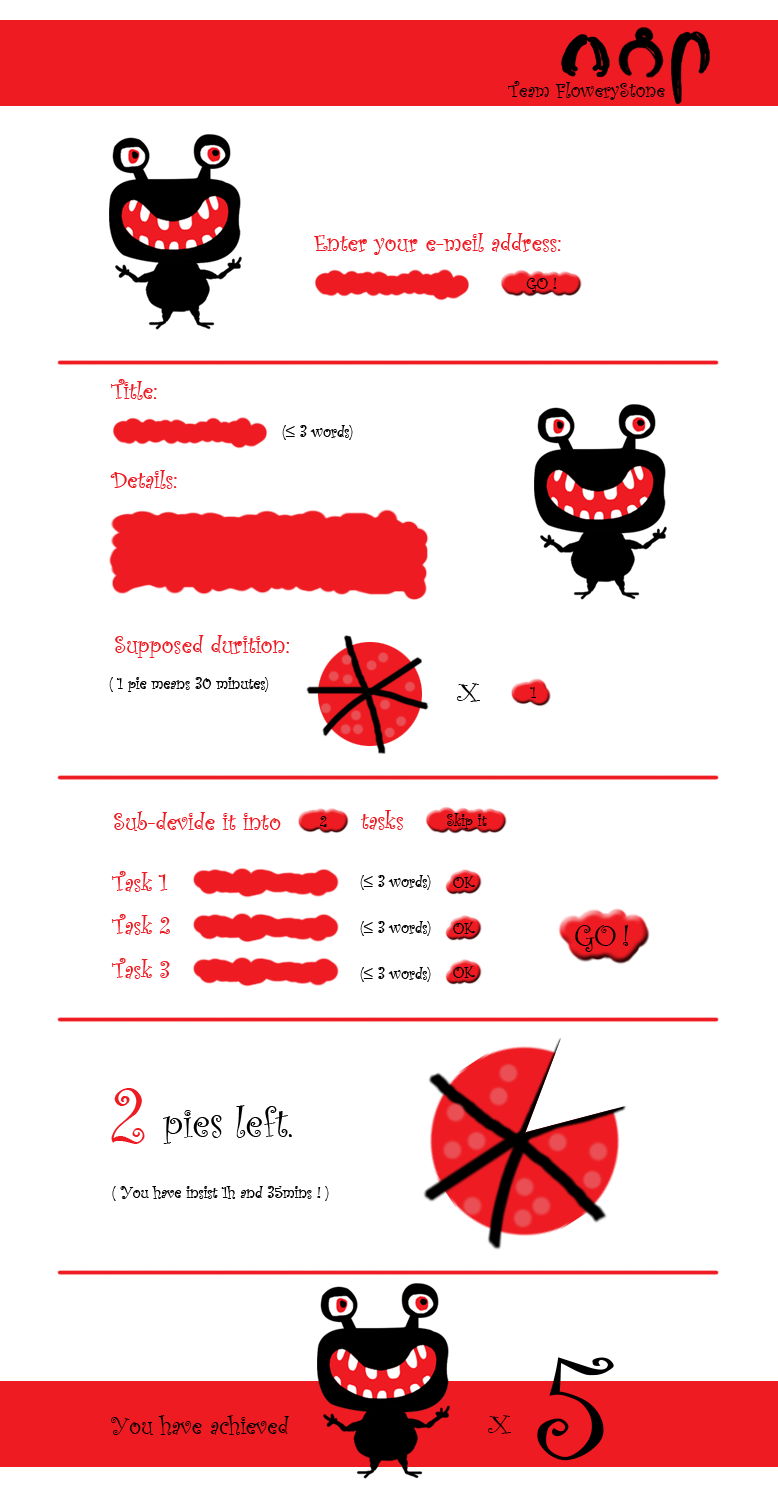
<style>
.page{position:relative;width:778px;height:1487px;background:#ffffff}
.page>*{position:absolute;margin:0}
.t1{font:20.8px "CurlzMT";color:#000000}
.t2{font:25px "CurlzMT";color:#ee1b22}
.t3{font:16.7px "CurlzMT";color:#000000}
.t4{font:25px "CurlzMT";color:#000000;scale:1.49 1}
.t5{font:33.3px "CurlzMT";color:#000000}
.t6{font:83.3px "CurlzMT";color:#ee1b22}
.t7{font:41.7px "CurlzMT";color:#000000}
.t8{font:150px "CurlzMT";color:#000000}
.t9{font:25px "CurlzMT";color:#000000}
</style>
<div class="page">
<p class="t1" style="left:507px;top:81px;width:158px;height:19px">Team FloweryStone</p>
<p class="t2" style="left:314px;top:233px;width:247px;height:22px">Enter your e-meil address:</p>
<p class="t3" style="left:526px;top:278px;width:31px;height:14px">GO !</p>
<p class="t2" style="left:110px;top:379px;width:47px;height:21px">Title:</p>
<p class="t3" style="left:282px;top:425px;width:71px;height:15px">(≤ 3 words)</p>
<p class="t2" style="left:110px;top:470px;width:67px;height:19px">Details:</p>
<p class="t2" style="left:115px;top:635px;width:174px;height:23px">Supposed durition:</p>
<p class="t3" style="left:109px;top:677px;width:160px;height:15px">( 1 pie means 30 minutes)</p>
<p class="t4" style="left:456px;top:683px;width:24px;height:19px">X</p>
<p class="t3" style="left:530px;top:687px;width:6px;height:11px">1</p>
<p class="t2" style="left:114px;top:811px;width:167px;height:20px">Sub-devide it into</p>
<p class="t3" style="left:319px;top:816px;width:8px;height:11px">2</p>
<p class="t2" style="left:361px;top:810px;width:42px;height:20px">tasks</p>
<p class="t3" style="left:447px;top:813px;width:40px;height:16px">Skip it</p>
<p class="t2" style="left:111px;top:871px;width:57px;height:21px">Task 1</p>
<p class="t3" style="left:360px;top:875px;width:71px;height:15px">(≤ 3 words)</p>
<p class="t3" style="left:453px;top:876px;width:22px;height:12px">OK</p>
<p class="t2" style="left:111px;top:914px;width:59px;height:21px">Task 2</p>
<p class="t3" style="left:360px;top:921px;width:71px;height:15px">(≤ 3 words)</p>
<p class="t3" style="left:453px;top:922px;width:22px;height:12px">OK</p>
<p class="t5" style="left:575px;top:925px;width:54px;height:27px">GO !</p>
<p class="t2" style="left:111px;top:958px;width:59px;height:21px">Task 3</p>
<p class="t3" style="left:453px;top:966px;width:22px;height:12px">OK</p>
<p class="t3" style="left:360px;top:967px;width:71px;height:15px">(≤ 3 words)</p>
<p class="t6" style="left:111px;top:1088px;width:34px;height:56px">2</p>
<p class="t7" style="left:163px;top:1105px;width:129px;height:39px">pies left.</p>
<p class="t3" style="left:112px;top:1186px;width:217px;height:15px">( You have insist 1h and 35mins ! )</p>
<p class="t8" style="left:537px;top:1357px;width:77px;height:104px;rotate:17deg">5</p>
<p class="t9" style="left:111px;top:1415px;width:178px;height:20px">You have achieved</p>
<p class="t4" style="left:487px;top:1415px;width:24px;height:19px">X</p>
</div>
